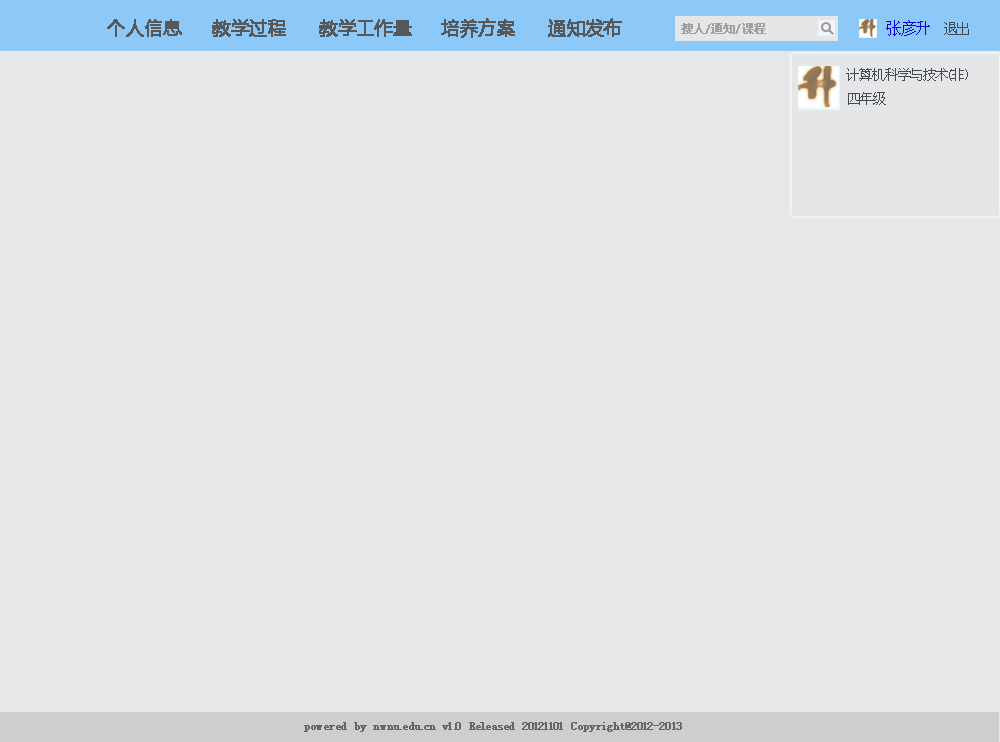
<style>
.page{position:relative;width:1000px;height:742px;background:#e5e7e8}
.page>*{position:absolute;margin:0}
.t1{font:18px "MicrosoftYaHei";color:#56585a;font-weight:bold}
.t2{font:12px "SimSun";color:#9fa0a1;font-weight:bold}
.t3{font:16px "SimSun";color:#0500dd}
.t4{font:14px "SimSun";color:#474b4f}
.t5{font:12px "SimSun";color:#666666;font-weight:bold}
</style>
<div class="page">
<p class="t1" style="left:107px;top:19px;width:75px;height:18px">个人信息</p>
<p class="t1" style="left:212px;top:19px;width:74px;height:18px">教学过程</p>
<p class="t1" style="left:319px;top:19px;width:93px;height:18px">教学工作量</p>
<p class="t1" style="left:441px;top:18px;width:74px;height:20px">培养方案</p>
<p class="t1" style="left:548px;top:18px;width:74px;height:19px">通知发布</p>
<p class="t2" style="left:681px;top:23px;width:85px;height:11px">搜人/通知/课程</p>
<p class="t3" style="left:886px;top:20px;width:44px;height:16px">张彦升</p>
<p class="t4" style="left:944px;top:22px;width:25px;height:13px">退出</p>
<p class="t4" style="left:846px;top:68px;width:122px;height:13px">计算机科学与技术(非）</p>
<p class="t4" style="left:848px;top:92px;width:38px;height:13px">四年级</p>
<p class="t5" style="left:304px;top:722px;width:378px;height:10px">powered by nwnu.edu.cn v1.0 Released 20121101 Copyright@2012-2013</p>
</div>
